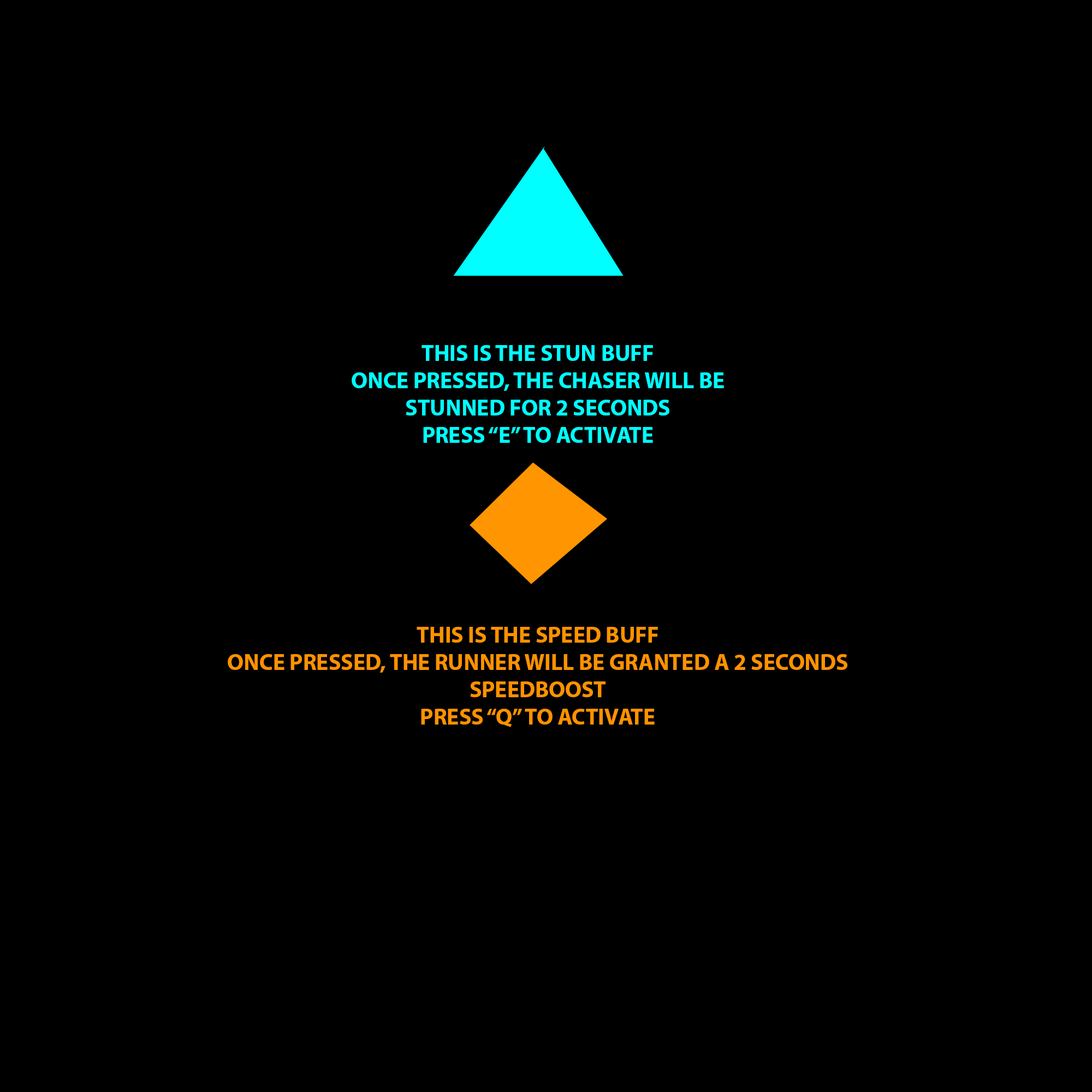
<style>
.page{position:relative;width:1092px;height:1092px;background:#000000}
.page>*{position:absolute;margin:0}
.t1{font:22.7px "MyriadPro-Bold";color:#00ffff}
.t2{font:22.7px "MyriadPro-Bold";color:#ff9200}
</style>
<div class="page">
<p class="t1" style="left:352px;top:345px;width:372px;height:98px;text-align:center">THIS IS THE STUN BUFF<br>ONCE PRESSED, THE CHASER WILL BE STUNNED FOR 2 SECONDS<br>PRESS “E” TO ACTIVATE</p>
<p class="t2" style="left:228px;top:627px;width:619px;height:100px;text-align:center">THIS IS THE SPEED BUFF<br>ONCE PRESSED, THE RUNNER WILL BE GRANTED A 2 SECONDS SPEEDBOOST<br>PRESS “Q” TO ACTIVATE</p>
</div>
